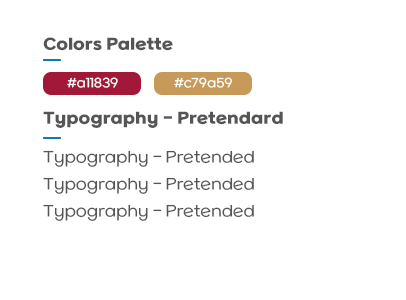
<style>
.page{position:relative;width:406px;height:300px;background:#ffffff}
.page>*{position:absolute;margin:0}
.t1{font:15px "SBAggroB";color:#555555}
.t2{font:12px "SBAggroL";color:#ffffff}
.t3{font:15px "SBAggroL";color:#555555}
</style>
<div class="page">
<p class="t1" style="left:43px;top:37px;width:130px;height:14px">Colors Palette</p>
<p class="t2" style="left:67px;top:77px;width:51px;height:11px">#a11839</p>
<p class="t2" style="left:174px;top:77px;width:58px;height:11px">#c79a59</p>
<p class="t1" style="left:43px;top:111px;width:240px;height:17px">Typography - Pretendard</p>
<p class="t3" style="left:43px;top:150px;width:211px;height:17px">Typography - Pretended</p>
<p class="t3" style="left:43px;top:177px;width:211px;height:17px">Typography - Pretended</p>
<p class="t3" style="left:43px;top:204px;width:211px;height:17px">Typography - Pretended</p>
</div>
